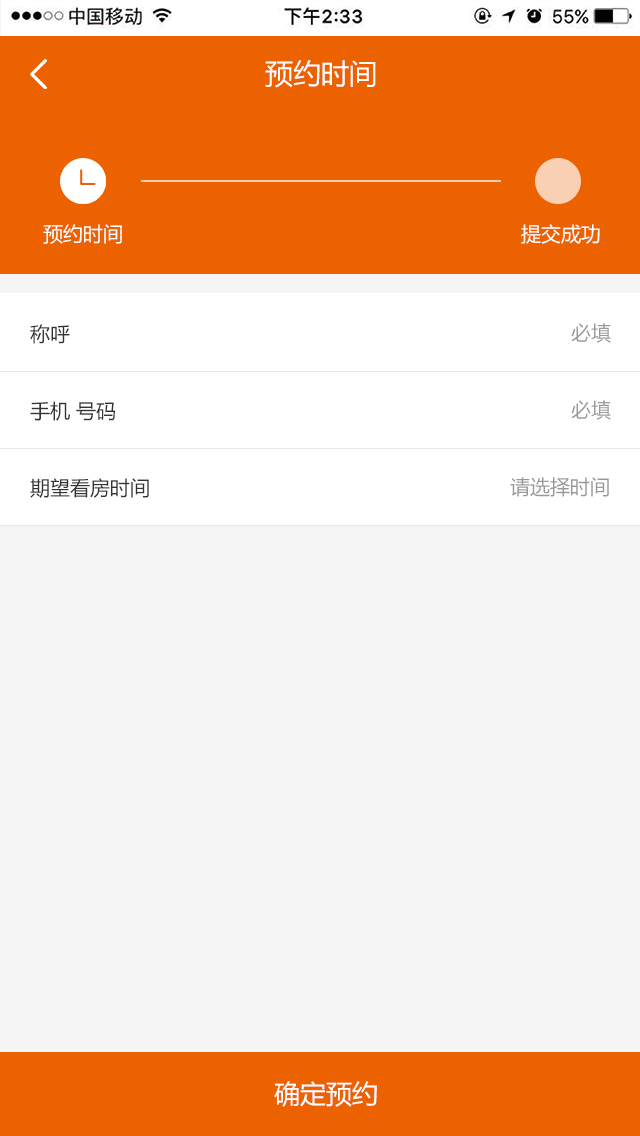
<style>
.page{position:relative;width:640px;height:1136px;background:#f5f5f5}
.page>*{position:absolute;margin:0}
.t1{font:28px "MicrosoftYaHei";color:#ffffff}
.t2{font:20px "MicrosoftYaHei";color:#ffffff}
.t3{font:20px "MicrosoftYaHei";color:#333333}
.t4{font:20px "MicrosoftYaHei";color:#999999}
.t5{font:26px "MicrosoftYaHei";color:#ffffff}
</style>
<div class="page">
<p class="t1" style="left:265px;top:60px;width:111px;height:28px">预约时间</p>
<p class="t2" style="left:43px;top:224px;width:79px;height:20px">预约时间</p>
<p class="t2" style="left:521px;top:224px;width:79px;height:20px">提交成功</p>
<p class="t3" style="left:30px;top:324px;width:40px;height:20px">称呼</p>
<p class="t4" style="left:571px;top:323px;width:40px;height:20px">必填</p>
<p class="t3" style="left:30px;top:401px;width:85px;height:20px">手机 号码</p>
<p class="t4" style="left:571px;top:400px;width:40px;height:20px">必填</p>
<p class="t3" style="left:30px;top:478px;width:119px;height:20px">期望看房时间</p>
<p class="t4" style="left:510px;top:477px;width:99px;height:20px">请选择时间</p>
<p class="t5" style="left:274px;top:1081px;width:103px;height:26px">确定预约</p>
</div>
